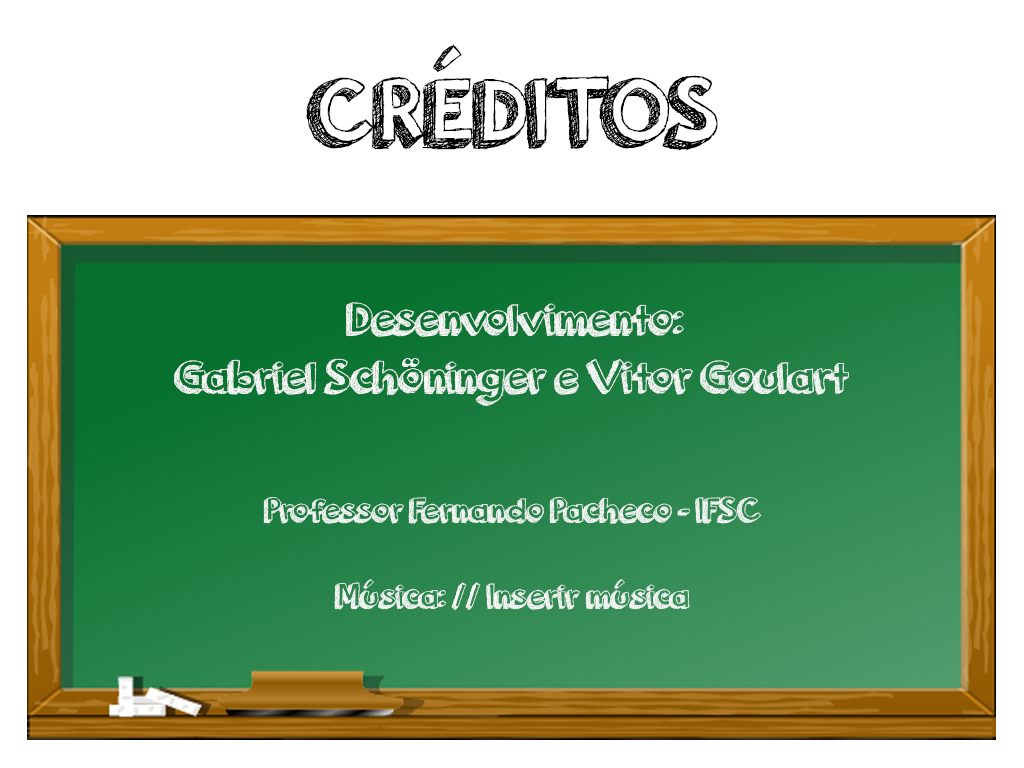
<style>
.page{position:relative;width:1024px;height:768px;background:#ffffff}
.page>*{position:absolute;margin:0}
.t1{font:100px "orangejuice";color:#000000}
.t2{font:48px "orangejuice";color:#ffffff}
.t3{font:36px "orangejuice";color:#ffffff}
</style>
<div class="page">
<p class="t1" style="left:306px;top:44px;width:412px;height:107px">CRÉDITOS</p>
<p class="t2" style="left:174px;top:302px;width:675px;height:104px;text-align:center">Desenvolvimento:<br>Gabriel Schöninger e Vitor Goulart</p>
<p class="t3" style="left:263px;top:496px;width:499px;height:114px;text-align:center">Professor Fernando Pacheco - IFSC<br><br>Música: // Inserir música</p>
</div>
